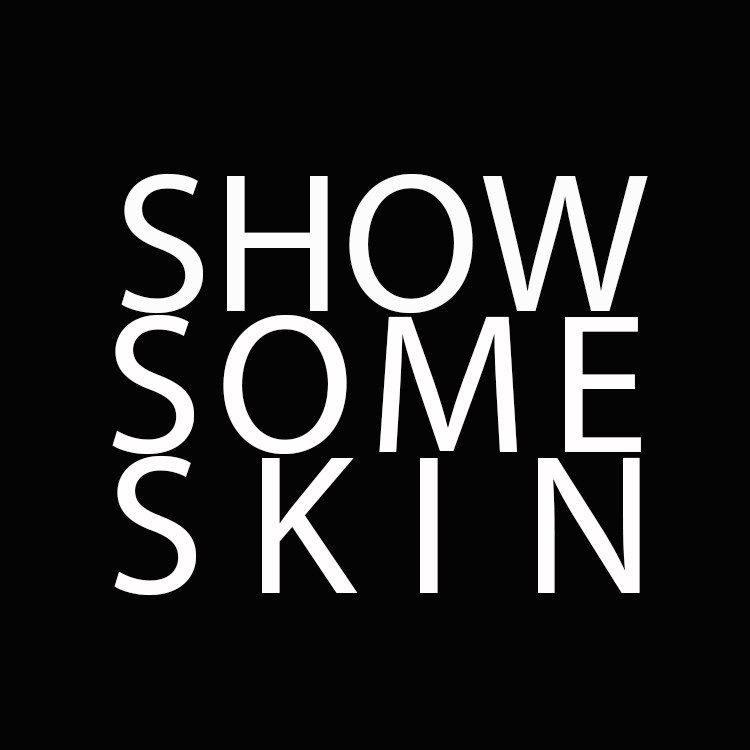
<style>
.page{position:relative;width:750px;height:750px;background:#040404}
.page>*{position:absolute;margin:0}
.t1{font:200px "MyriadPro-Regular";color:#fdfcfc}
.t2{font:12px "MyriadPro-Regular";color:#000000}
.t3{font:200px "MyriadPro-Regular";color:#fffdfd}
</style>
<div class="page">
<p class="t1" style="left:121px;top:173px;width:527px;height:141px"><span class="t2"><br></span>SHOW</p>
<p class="t3" style="left:112px;top:314px;width:529px;height:141px">S  O  M   E</p>
<p class="t3" style="left:114px;top:455px;width:526px;height:141px">S K  I     N</p>
</div>
